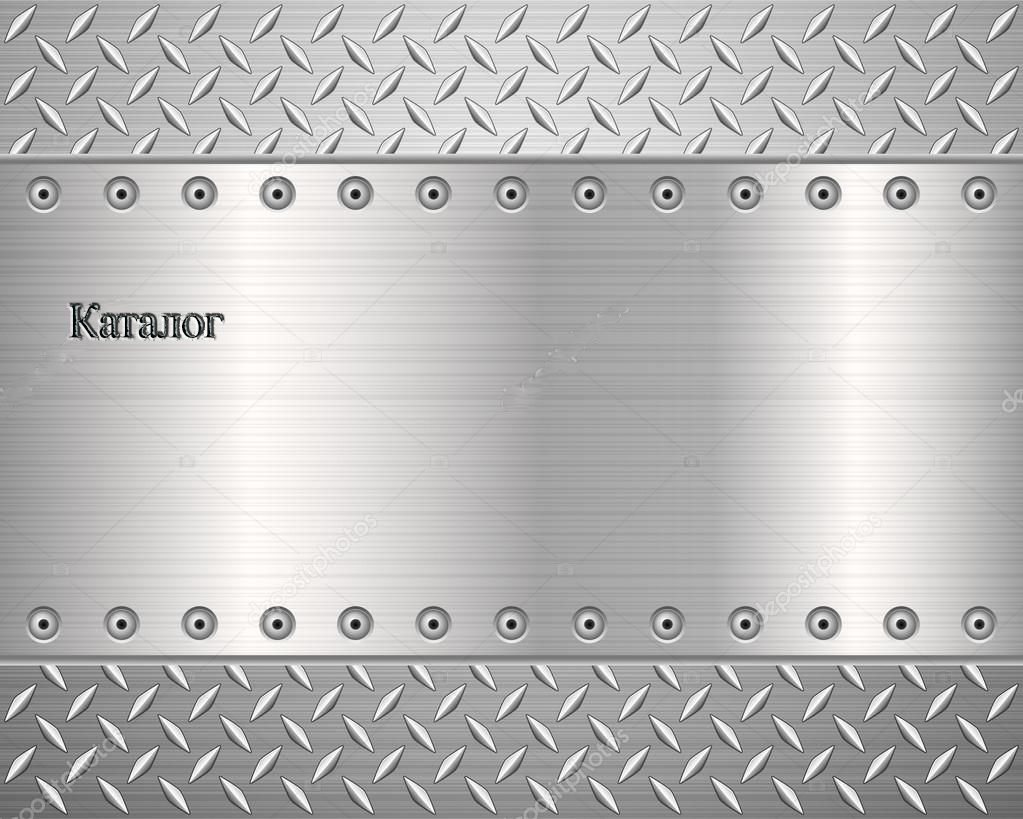
<style>
.page{position:relative;width:1023px;height:819px}
.page>*{position:absolute;margin:0}
.t1{font:48px "TimesNewRomanPSMT";letter-spacing:-0.025em}
</style>
<div class="page">
<p class="t1" style="left:68px;top:305px;width:155px;height:33px">Каталог</p>
</div>
